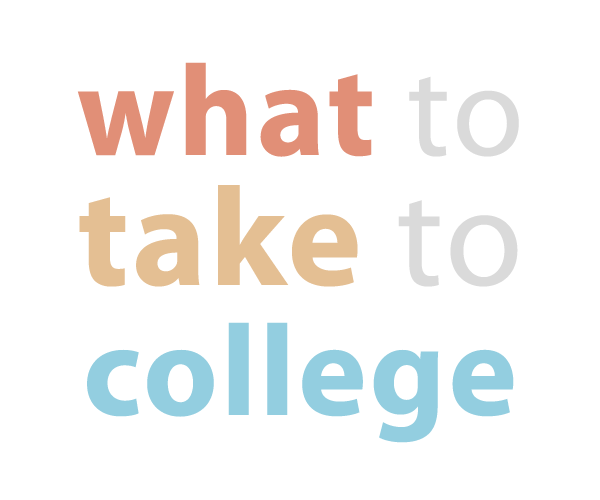
<style>
.page{position:relative;width:600px;height:500px;background:#ffffff}
.page>*{position:absolute;margin:0}
.t1{font:130px/130px "MyriadPro-Bold";letter-spacing:0.022em;color:#93cee0}
.t2{font:130px/130px "MyriadPro-Bold";letter-spacing:0.022em;color:#e18f77}
.t3{font:130px/130px "MyriadPro-Regular";letter-spacing:0.022em;color:#dadada}
.t4{font:141px/130px "MyriadPro-Bold";letter-spacing:0.022em;color:#e4bf93}
.t5{font:141px/130px "MyriadPro-Regular";letter-spacing:0.022em;color:#dadada}
</style>
<div class="page">
<p class="t1" style="left:77px;top:62px;width:442px;height:381px;text-align:center"><span class="t2">what </span><span class="t3">to<br></span><span class="t4">take </span><span class="t5">to<br></span>college</p>
</div>
